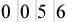
<style>
.page{position:relative;width:72px;height:22px;background:#ffffff}
.page>*{position:absolute;margin:0}
.t1{font:20px "TimesNewRomanPSMT";color:#000000}
</style>
<div class="page">
<p class="t1" style="left:1px;top:4px;width:9px;height:15px">0</p>
<p class="t1" style="left:20px;top:4px;width:9px;height:15px">0</p>
<p class="t1" style="left:38px;top:4px;width:8px;height:15px">5</p>
<p class="t1" style="left:56px;top:4px;width:9px;height:15px">6</p>
</div>
